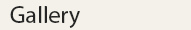
<style>
.page{position:relative;width:191px;height:30px;background:#f3f1e9}
.page>*{position:absolute;margin:0}
.t1{font:24px "MyriadPro-Regular";color:#252525}
</style>
<div class="page">
<p class="t1" style="left:10px;top:6px;width:70px;height:22px">Gallery</p>
</div>
